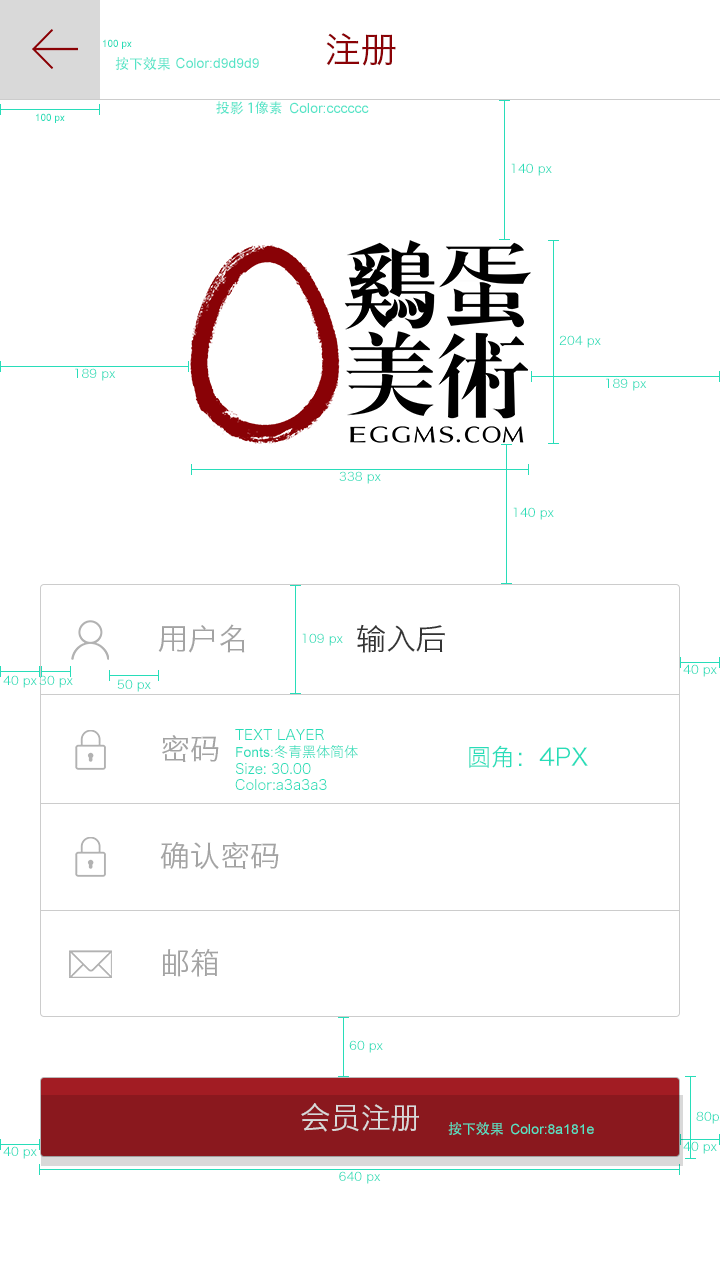
<style>
.page{position:relative;width:720px;height:1280px;background:#ffffff}
.page>*{position:absolute;margin:0}
.t1{font:10px "ArialMT";color:#28ddb9}
.t2{font:36px "HiraginoSansGB-W3";color:#8a0105}
.t3{font:14px "AdobeHeitiStd-Regular";color:#53e4c7}
.t4{font:14px "ArialMT";color:#53e4c7}
.t5{font:12px "HiraginoSansGB-W3";color:#28ddb9}
.t6{font:30px "HiraginoSansGB-W3";color:#a3a3a3}
.t7{font:30px "HiraginoSansGB-W3";color:#343434}
.t8{font:14px "HiraginoSansGB-W3";color:#28ddb9}
.t9{font:14px "ArialMT";color:#28ddb9}
.t10{font:24px "HiraginoSansGB-W3";color:#28ddb9}
.t11{font:30px "HiraginoSansGB-W3";color:#d9d9d9}
</style>
<div class="page">
<p class="t1" style="left:103px;top:39px;width:29px;height:10px">100 px</p>
<p class="t2" style="left:326px;top:33px;width:70px;height:33px">注册</p>
<p class="t3" style="left:115px;top:57px;width:55px;height:14px">按下效果</p>
<p class="t4" style="left:176px;top:57px;width:83px;height:12px">Color:d9d9d9</p>
<p class="t4" style="left:216px;top:101px;width:153px;height:14px"><span class="t3">投影 1像素  </span>Color:cccccc</p>
<p class="t1" style="left:36px;top:113px;width:29px;height:10px">100 px</p>
<p class="t5" style="left:511px;top:163px;width:41px;height:13px">140 px</p>
<p class="t5" style="left:559px;top:335px;width:42px;height:13px">204 px</p>
<p class="t5" style="left:75px;top:368px;width:41px;height:13px">189 px</p>
<p class="t5" style="left:606px;top:378px;width:41px;height:13px">189 px</p>
<p class="t5" style="left:339px;top:471px;width:42px;height:13px">338 px</p>
<p class="t5" style="left:513px;top:507px;width:41px;height:13px">140 px</p>
<p class="t6" style="left:158px;top:624px;width:87px;height:29px">用户名</p>
<p class="t7" style="left:357px;top:624px;width:88px;height:29px">输入后</p>
<p class="t5" style="left:302px;top:633px;width:41px;height:13px">109 px</p>
<p class="t5" style="left:683px;top:664px;width:34px;height:13px">40 px</p>
<p class="t5" style="left:3px;top:675px;width:34px;height:13px">40 px</p>
<p class="t5" style="left:39px;top:675px;width:34px;height:13px">30 px</p>
<p class="t5" style="left:117px;top:679px;width:34px;height:13px">50 px</p>
<p class="t6" style="left:162px;top:735px;width:57px;height:27px">密码</p>
<p class="t8" style="left:235px;top:729px;width:123px;height:61px">TEXT LAYER<br><span class="t9">Fonts:</span>冬青黑体简体<br>Size: 30.00<br>Color:a3a3a3</p>
<p class="t10" style="left:469px;top:745px;width:119px;height:23px">圆角：4PX</p>
<p class="t6" style="left:160px;top:842px;width:119px;height:28px">确认密码</p>
<p class="t6" style="left:162px;top:948px;width:56px;height:29px">邮箱</p>
<p class="t5" style="left:349px;top:1040px;width:34px;height:13px">60 px</p>
<p class="t11" style="left:301px;top:1103px;width:118px;height:29px">会员注册</p>
<p class="t4" style="left:448px;top:1122px;width:146px;height:14px"><span class="t3">按下效果  </span>Color:8a181e</p>
<p class="t5" style="left:683px;top:1141px;width:34px;height:13px">40 px</p>
<p class="t5" style="left:3px;top:1146px;width:34px;height:13px">40 px</p>
<p class="t5" style="left:339px;top:1171px;width:42px;height:13px">640 px</p>
</div>
